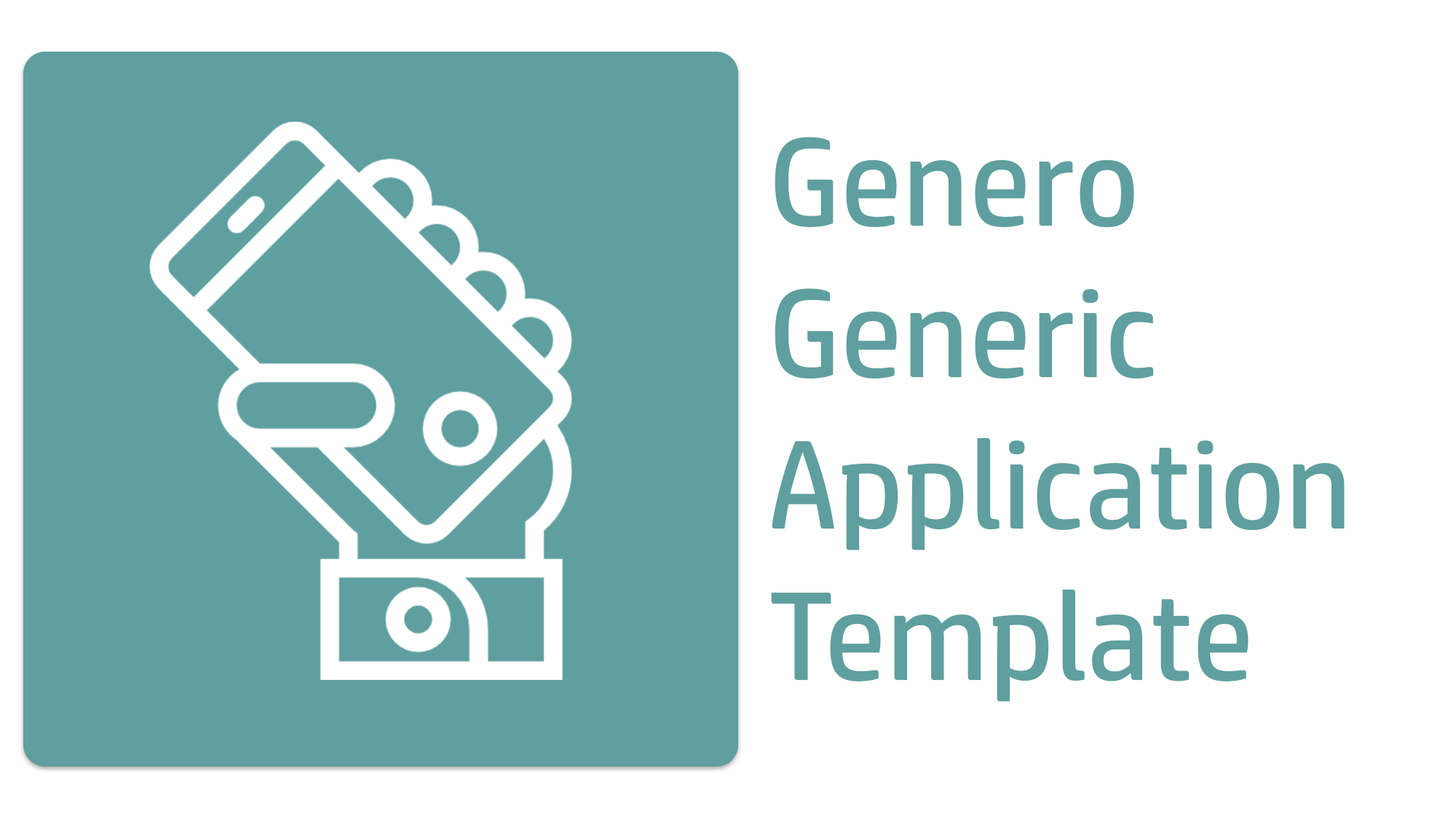
<style>
.page{position:relative;width:1456px;height:819px;background:#ffffff}
.page>*{position:absolute;margin:0}
.t1{font:126.1px "HPSimplified-Regular";color:#5f9f9f}
</style>
<div class="page">
<p class="t1" style="left:771px;top:137px;width:574px;height:565px">Genero<br>Generic<br>Application<br>Template</p>
</div>
